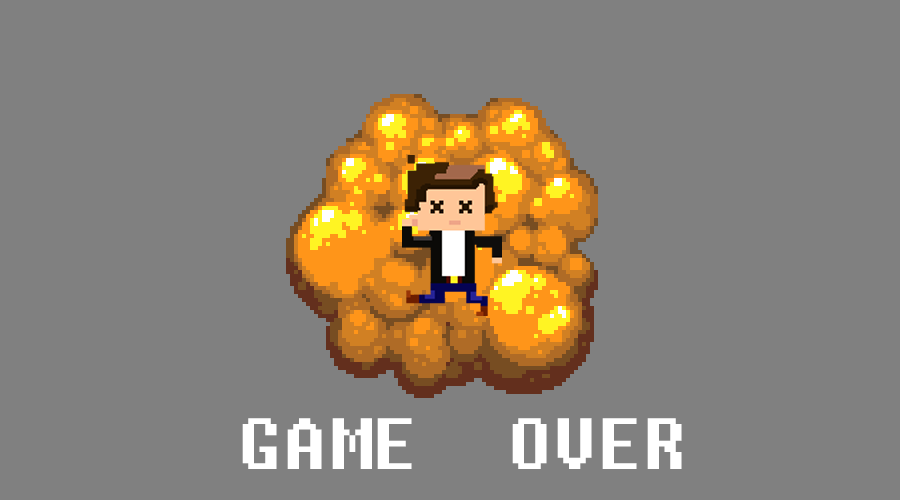
<style>
.page{position:relative;width:900px;height:500px;background:#808080}
.page>*{position:absolute;margin:0}
.t1{font:72px "Fixedsys";color:#ffffff}
</style>
<div class="page">
<p class="t1" style="left:242px;top:418px;width:440px;height:51px">GAME  OVER</p>
</div>
